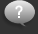
<style>
.page{position:relative;width:38px;height:34px;background:#333333}
.page>*{position:absolute;margin:0}
.t1{font:14px "YDIYGO330";letter-spacing:-0.05em;color:#ffffff;font-weight:bold;scale:0.95 1}
</style>
<div class="page">
<p class="t1" style="left:15px;top:5px;width:8px;height:13px">?</p>
</div>
